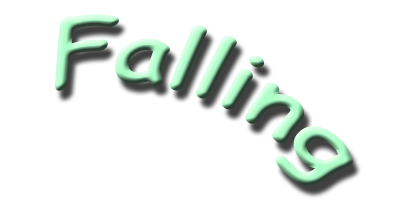
<style>
.page{position:relative;width:400px;height:200px;background:#ffffff}
.page>*{position:absolute;margin:0}
.t1{font:87.2px "ComicSansMS-Bold";font-style:italic;scale:0.81 1}
.t2{font:126.9px "ComicSansMS-Bold";scale:0.81 1}
</style>
<div class="page">
<p class="t1" style="left:55px;top:14px;width:298px;height:172px"><span class="t2">   </span>Falling</p>
</div>
